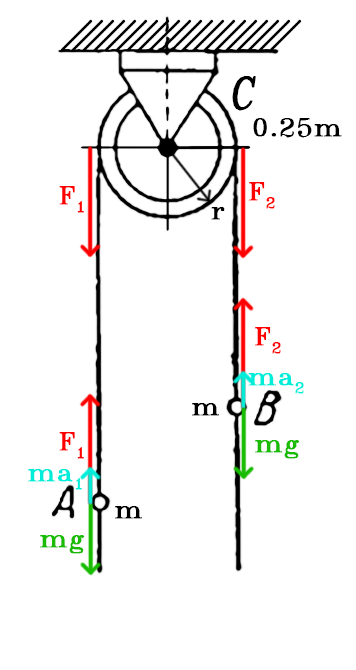
<style>
.page{position:relative;width:356px;height:670px;background:#ffffff}
.page>*{position:absolute;margin:0}
.t1{font:44px "SWRomnt";color:#000000;font-weight:bold;font-style:italic;scale:0.78 1}
.t2{font:24px "SWRomnt";color:#000000;font-weight:bold}
.t3{font:24px "SWRomnt";color:#ff0000;font-weight:bold}
.t4{font:24px "SWRomnt";color:#00eed9;font-weight:bold}
.t5{font:24px "SWRomnt";color:#1abc03;font-weight:bold}
</style>
<div class="page">
<p class="t1" style="left:232px;top:76px;width:24px;height:35px">C</p>
<p class="t2" style="left:253px;top:118px;width:89px;height:20px">0.25m</p>
<p class="t3" style="left:249px;top:182px;width:26px;height:27px">F2</p>
<p class="t3" style="left:59px;top:186px;width:25px;height:27px">F1</p>
<p class="t2" style="left:211px;top:207px;width:14px;height:13px">r</p>
<p class="t3" style="left:255px;top:327px;width:26px;height:27px">F2</p>
<p class="t4" style="left:248px;top:373px;width:56px;height:21px">ma2</p>
<p class="t2" style="left:192px;top:403px;width:27px;height:13px">m</p>
<p class="t3" style="left:59px;top:432px;width:25px;height:27px">F1</p>
<p class="t5" style="left:255px;top:440px;width:45px;height:19px">mg</p>
<p class="t4" style="left:28px;top:469px;width:54px;height:21px">ma1</p>
<p class="t2" style="left:115px;top:506px;width:27px;height:13px">m</p>
<p class="t5" style="left:40px;top:535px;width:45px;height:19px">mg</p>
</div>
